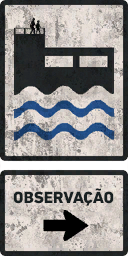
<style>
.page{position:relative;width:128px;height:256px}
.page>*{position:absolute;margin:0}
.t1{font:16.5px "DINNextLTPro-Heavy";letter-spacing:-0.005em;color:#182021}
</style>
<div class="page">
<p class="t1" style="left:13px;top:188px;width:101px;height:18px">OBSERVAÇÃO</p>
</div>
